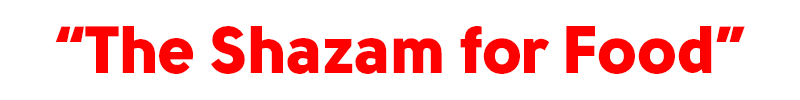
<style>
.page{position:relative;width:800px;height:100px;background:#ffffff}
.page>*{position:absolute;margin:0}
.t1{font:66.7px "Solomon-Sans-Black";color:#ff0000}
</style>
<div class="page">
<p class="t1" style="left:55px;top:26px;width:690px;height:48px">“The Shazam for Food”</p>
</div>
